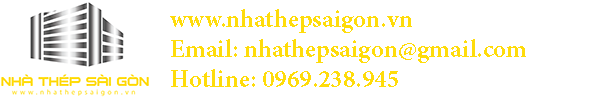
<style>
.page{position:relative;width:600px;height:100px;background:#ffffff}
.page>*{position:absolute;margin:0}
.t1{font:25px "MinionPro-Bold";color:#ffdc0a}
</style>
<div class="page">
<p class="t1" style="left:170px;top:9px;width:356px;height:78px;text-align:right">www.nhathepsaigon.vn<br>Email: nhathepsaigon@gmail.com<br>Hotline: 0969.238.945</p>
</div>
